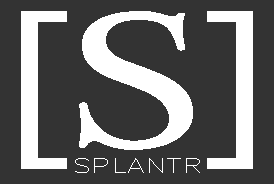
<style>
.page{position:relative;width:274px;height:184px;background:#333333}
.page>*{position:absolute;margin:0}
.t1{font:198.5px "MyriadPro-Regular";letter-spacing:-0.01em;color:#ffffff;scale:1.29 1}
.t2{font:198.5px "PlantagenetCherokee";letter-spacing:-0.01em;color:#ffffff;scale:1.29 1}
.t3{font:20px "RomanS";letter-spacing:-0.01em;color:#ffffff;scale:1.42 1}
</style>
<div class="page">
<p class="t1" style="left:21px;top:11px;width:232px;height:158px">[<span class="t2">S</span>]</p>
<p class="t3" style="left:75px;top:158px;width:125px;height:15px">SPLANTR</p>
</div>
